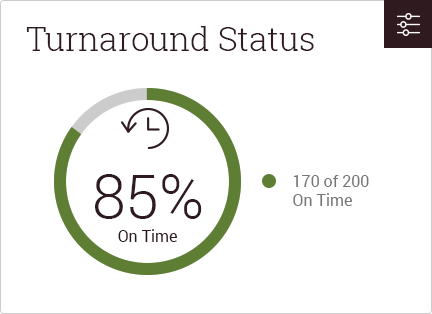
<style>
.page{position:relative;width:432px;height:314px;background:#ffffff}
.page>*{position:absolute;margin:0}
.t1{font:33px "RobotoSlab-Light";color:#2f1b1f}
.t2{font:61px "Roboto-Light";color:#2f1b1f}
.t3{font:16px "Roboto-Regular";color:#767676}
.t4{font:16px "Roboto-Regular";color:#2f1b1f}
</style>
<div class="page">
<p class="t1" style="left:26px;top:26px;width:288px;height:25px">Turnaround Status</p>
<p class="t2" style="left:95px;top:174px;width:107px;height:45px">85%</p>
<p class="t3" style="left:293px;top:175px;width:76px;height:31px">170 of 200 <br>On Time</p>
<p class="t4" style="left:118px;top:229px;width:59px;height:13px">On Time</p>
</div>
